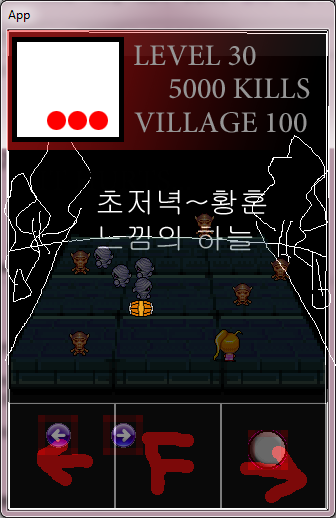
<style>
.page{position:relative;width:336px;height:518px;background:#000000}
.page>*{position:absolute;margin:0}
.t1{font:30px "MinionPro-Medium";color:#959595}
.t2{font:30px "Gulim";color:#ffffff}
</style>
<div class="page">
<p class="t1" style="left:134px;top:45px;width:122px;height:21px">LEVEL 30</p>
<p class="t1" style="left:169px;top:78px;width:141px;height:21px">5000 KILLS</p>
<p class="t1" style="left:134px;top:112px;width:173px;height:21px">VILLAGE 100</p>
<p class="t2" style="left:97px;top:190px;width:170px;height:61px">초저녁~황혼<br>느낌의 하늘</p>
</div>
